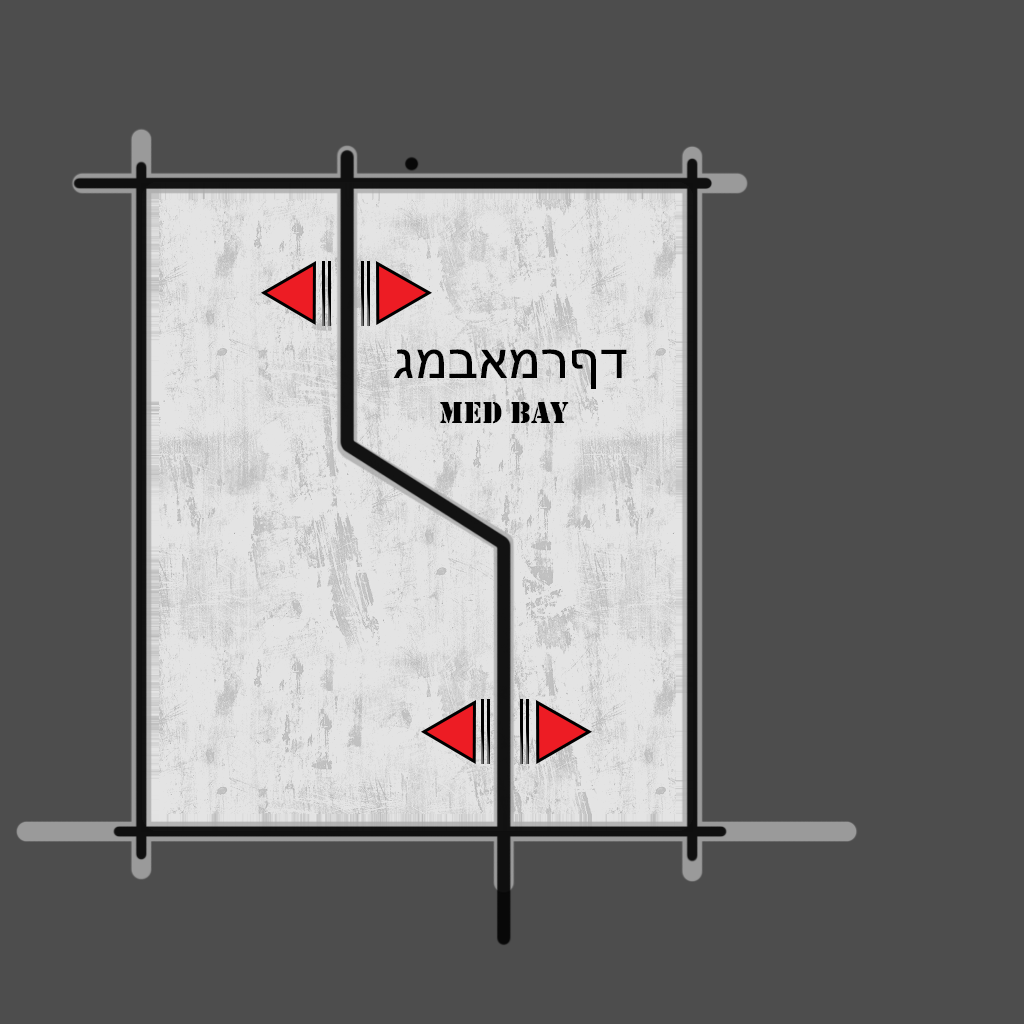
<style>
.page{position:relative;width:1024px;height:1024px;background:#4d4d4d}
.page>*{position:absolute;margin:0}
.t1{font:54.6px "Gil";color:#000000}
.t2{font:31.2px "Stencil";color:#000000}
</style>
<div class="page">
<p class="t1" style="left:393px;top:349px;width:234px;height:40px">doctor;s</p>
<p class="t2" style="left:440px;top:402px;width:129px;height:21px">med Bay</p>
</div>
